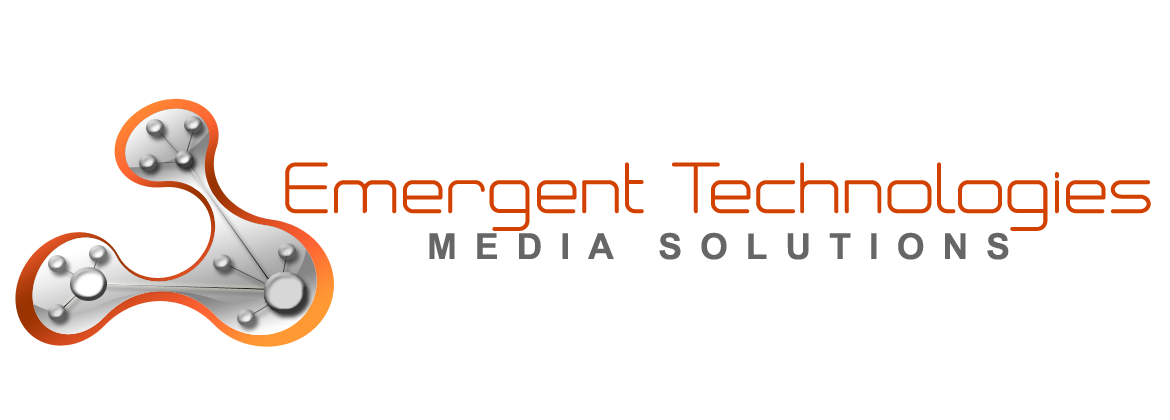
<style>
.page{position:relative;width:1170px;height:420px;background:#ffffff}
.page>*{position:absolute;margin:0}
.t1{font:63.1px "Neogrey";letter-spacing:0.02em;color:#d34100}
.t2{font:35.8px "Arial-BoldMT";letter-spacing:0.5em;color:#666666}
</style>
<div class="page">
<p class="t1" style="left:285px;top:162px;width:866px;height:69px">Emergent Technologies</p>
<p class="t2" style="left:429px;top:232px;width:580px;height:28px">MEDIA SOLUTIONS</p>
</div>
